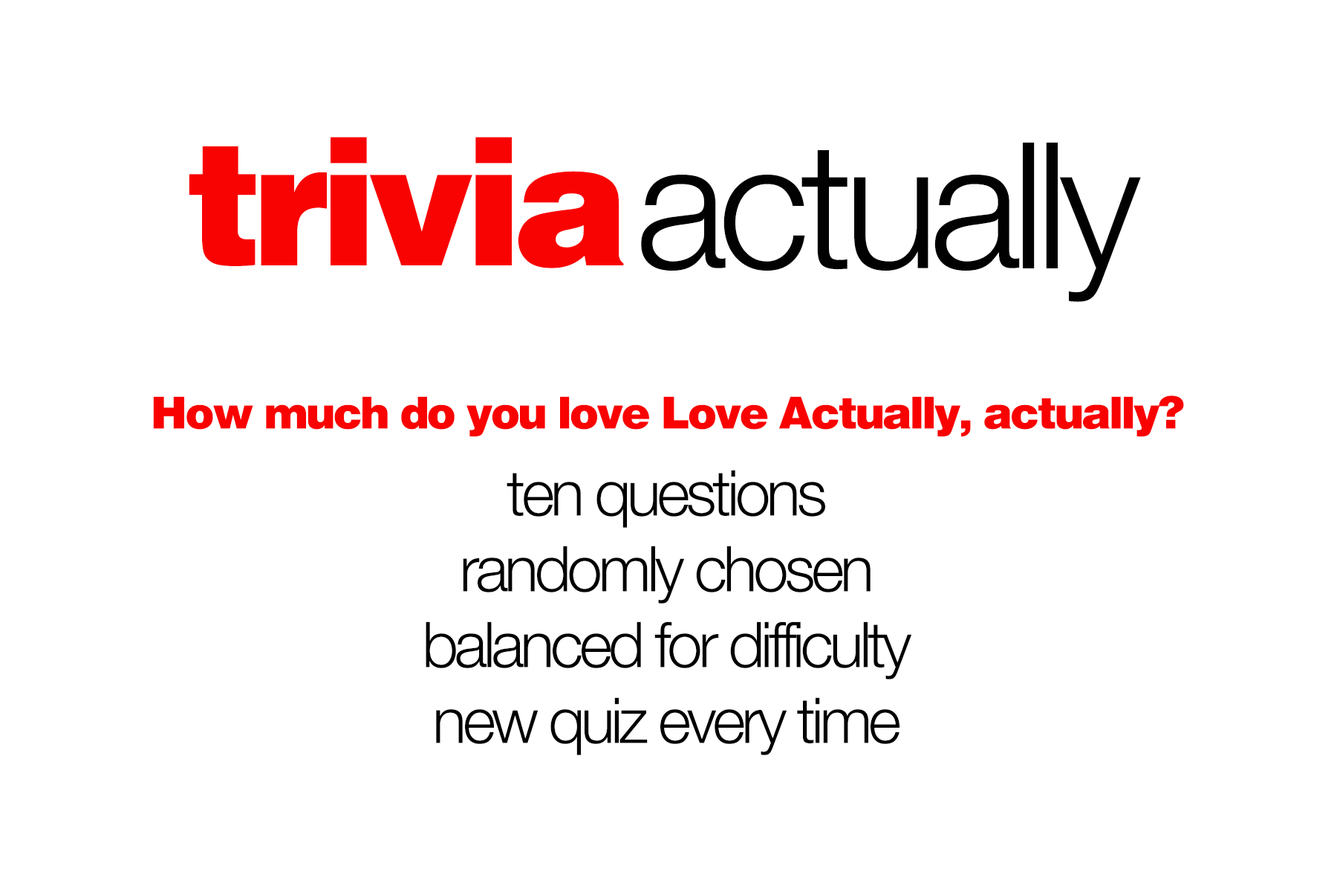
<style>
.page{position:relative;width:1337px;height:892px;background:#ffffff}
.page>*{position:absolute;margin:0}
.t1{font:175.9px "Helvetica-Black";letter-spacing:-0.06em;color:#f90202}
.t2{font:175.9px "HelveticaNeue-Light";letter-spacing:-0.05em;color:#010101}
.t3{font:44.7px "Helvetica-Black";letter-spacing:-0.06em;color:#f90202}
.t4{font:63.2px "HelveticaNeue-Light";letter-spacing:-0.06em;color:#000000}
</style>
<div class="page">
<p class="t1" style="left:189px;top:137px;width:435px;height:131px">trivia</p>
<p class="t2" style="left:641px;top:142px;width:500px;height:160px">actually</p>
<p class="t3" style="left:153px;top:395px;width:1031px;height:42px">How much do you love Love Actually, actually?</p>
<p class="t4" style="left:426px;top:470px;width:486px;height:285px;text-align:center">ten questions<br>randomly chosen<br>balanced for difficulty<br>new quiz every time</p>
</div>
